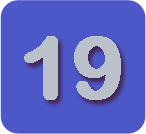
<style>
.page{position:relative;width:146px;height:134px;background:#4d58c8}
.page>*{position:absolute;margin:0}
.t1{font:86.1px "ArialRoundedMTBold";letter-spacing:-0.01em;color:#bbc1ca;font-weight:bold}
</style>
<div class="page">
<p class="t1" style="left:24px;top:36px;width:97px;height:64px">19</p>
</div>
